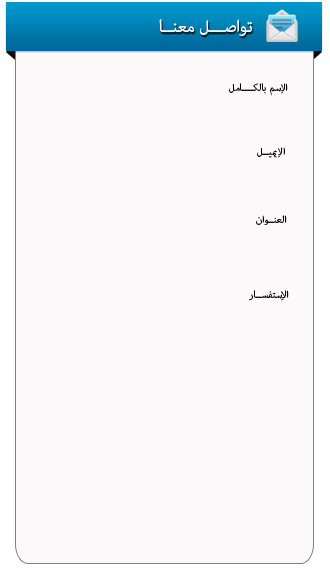
<style>
.page{position:relative;width:330px;height:580px;background:#fbf9f9}
.page>*{position:absolute;margin:0}
.t1{font:24px "AdobeArabic-Regular";color:#ffffff}
.t2{font:14px "AdobeArabic-Regular";color:#060606}
.t3{font:14px "AdobeArabic-Regular";color:#030303}
</style>
<div class="page">
<p class="t1" style="left:159px;top:19px;width:93px;height:17px">تواصـــل معنــا</p>
<p class="t2" style="left:229px;top:83px;width:59px;height:13px">الإسم بالكــــامل</p>
<p class="t2" style="left:257px;top:147px;width:28px;height:11px">الإيميــل</p>
<p class="t3" style="left:256px;top:215px;width:31px;height:10px">العنــوان</p>
<p class="t2" style="left:248px;top:290px;width:41px;height:11px">الإستفســار</p>
</div>
